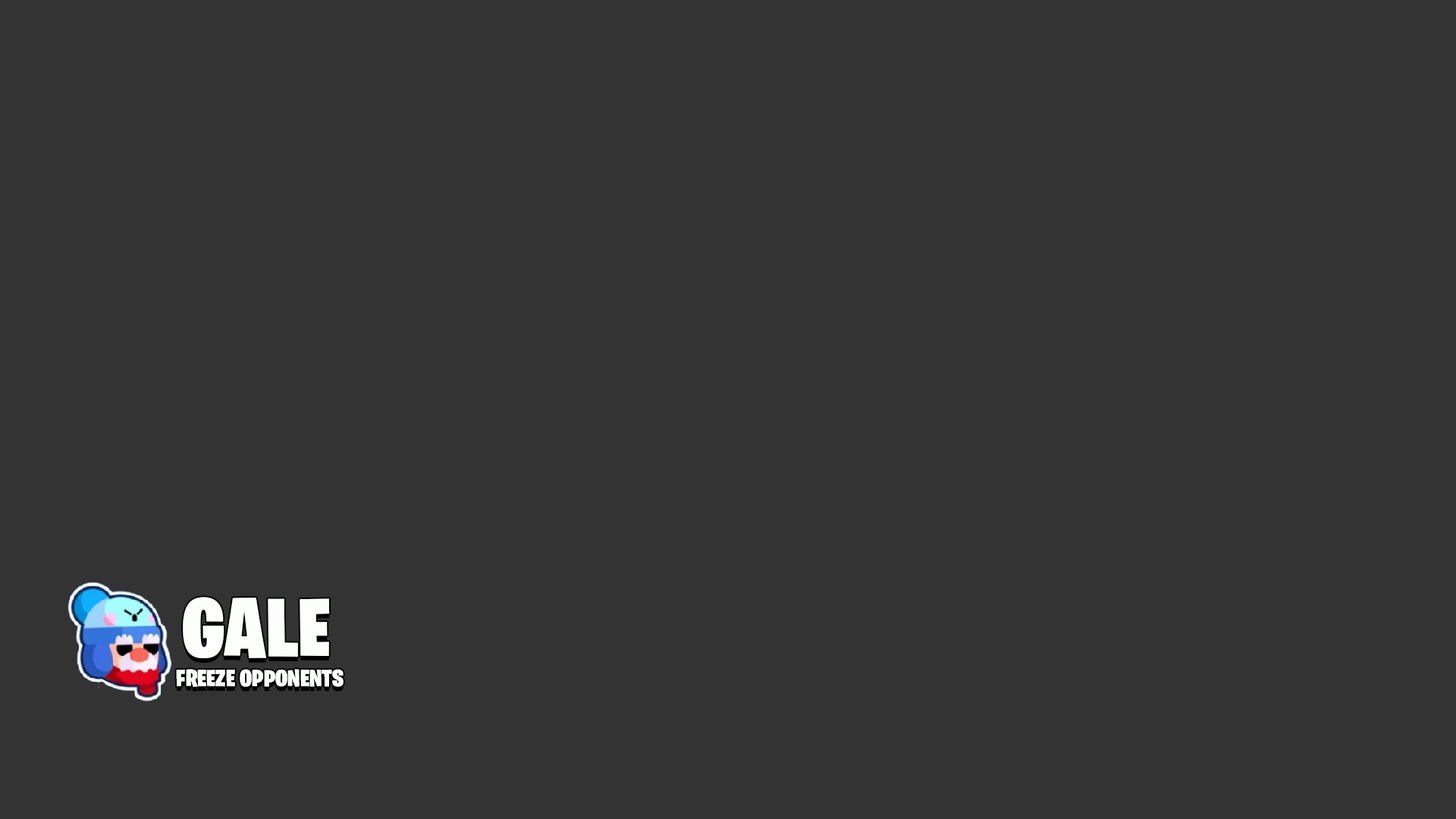
<style>
.page{position:relative;width:1456px;height:819px;background:#333333}
.page>*{position:absolute;margin:0}
.t1{font:84px "BurbankBigCondensed-Black";color:#fdfffd;scale:1.08 1}
.t2{font:23.9px "BurbankBigCondensed-Black";color:#fdfffd;scale:1.08 1}
</style>
<div class="page">
<p class="t1" style="left:183px;top:597px;width:147px;height:61px">GALE</p>
<p class="t2" style="left:176px;top:669px;width:168px;height:18px">FREEZE OPPONENTS</p>
</div>
